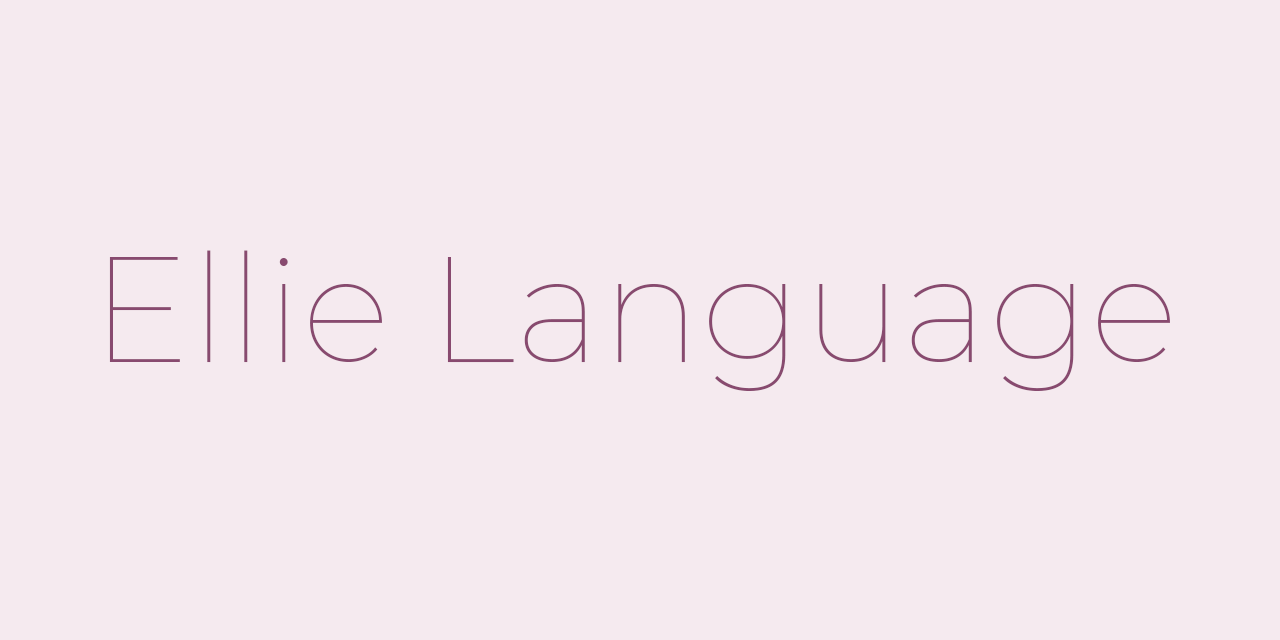
<style>
.page{position:relative;width:1280px;height:640px;background:#f5eaef}
.page>*{position:absolute;margin:0}
.t1{font:150px "Montserrat-Thin";color:#884a6f}
</style>
<div class="page">
<p class="t1" style="left:109px;top:250px;width:1061px;height:141px">Ellie Language</p>
</div>
